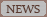
<style>
.page{position:relative;width:47px;height:17px;background:#bfbfbf}
.page>*{position:absolute;margin:0}
.t1{font:12px "Constantia";color:#5b3b30}
</style>
<div class="page">
<p class="t1" style="left:6px;top:5px;width:34px;height:8px">NEWS</p>
</div>
